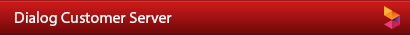
<style>
.page{position:relative;width:410px;height:35px}
.page>*{position:absolute;margin:0}
.t1{font:16px "MyriadPro-Regular";color:#fefefe}
</style>
<div class="page">
<p class="t1" style="left:15px;top:11px;width:157px;height:15px">Dialog Customer Server</p>
</div>
